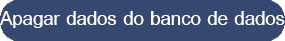
<style>
.page{position:relative;width:285px;height:41px;background:#354870}
.page>*{position:absolute;margin:0}
.t1{font:20.6px "SimplifiedArabic";color:#ffffff}
</style>
<div class="page">
<p class="t1" style="left:0px;top:11px;width:285px;height:17px">Apagar dados do banco de dados</p>
</div>
